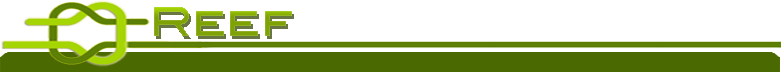
<style>
.page{position:relative;width:781px;height:72px;background:#ffffff}
.page>*{position:absolute;margin:0}
.t1{font:40.2px "BlairMdITCTTMedium";scale:1.06 1}
</style>
<div class="page">
<p class="t1" style="left:154px;top:7px;width:138px;height:29px">Reef</p>
</div>
